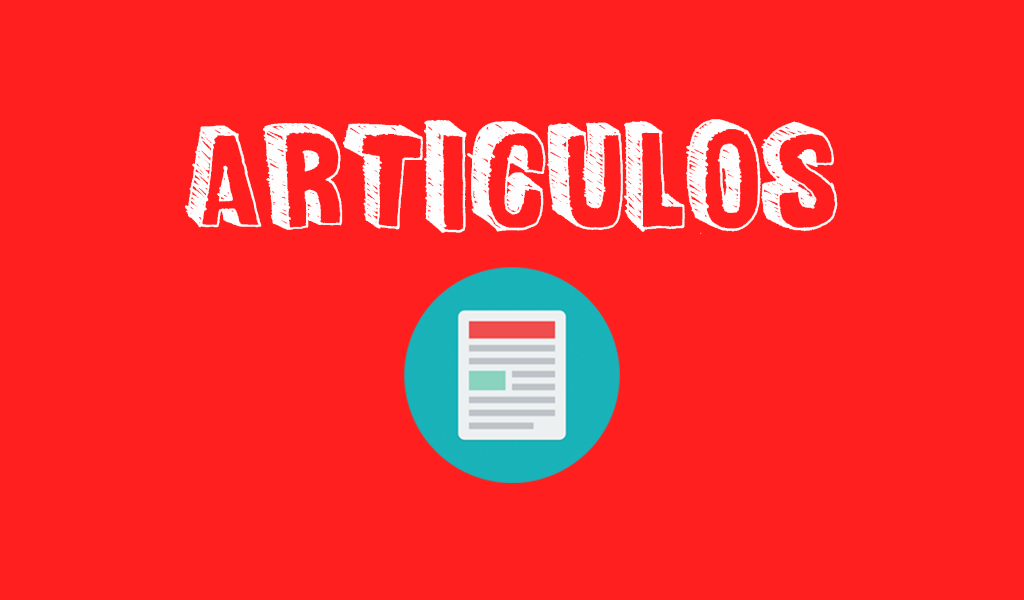
<style>
.page{position:relative;width:1024px;height:600px;background:#ff1f1f}
.page>*{position:absolute;margin:0}
.t1{font:105.5px "FunSized";color:#fffefe;scale:0.96 1}
</style>
<div class="page">
<p class="t1" style="left:185px;top:119px;width:653px;height:115px">Articulos</p>
</div>
